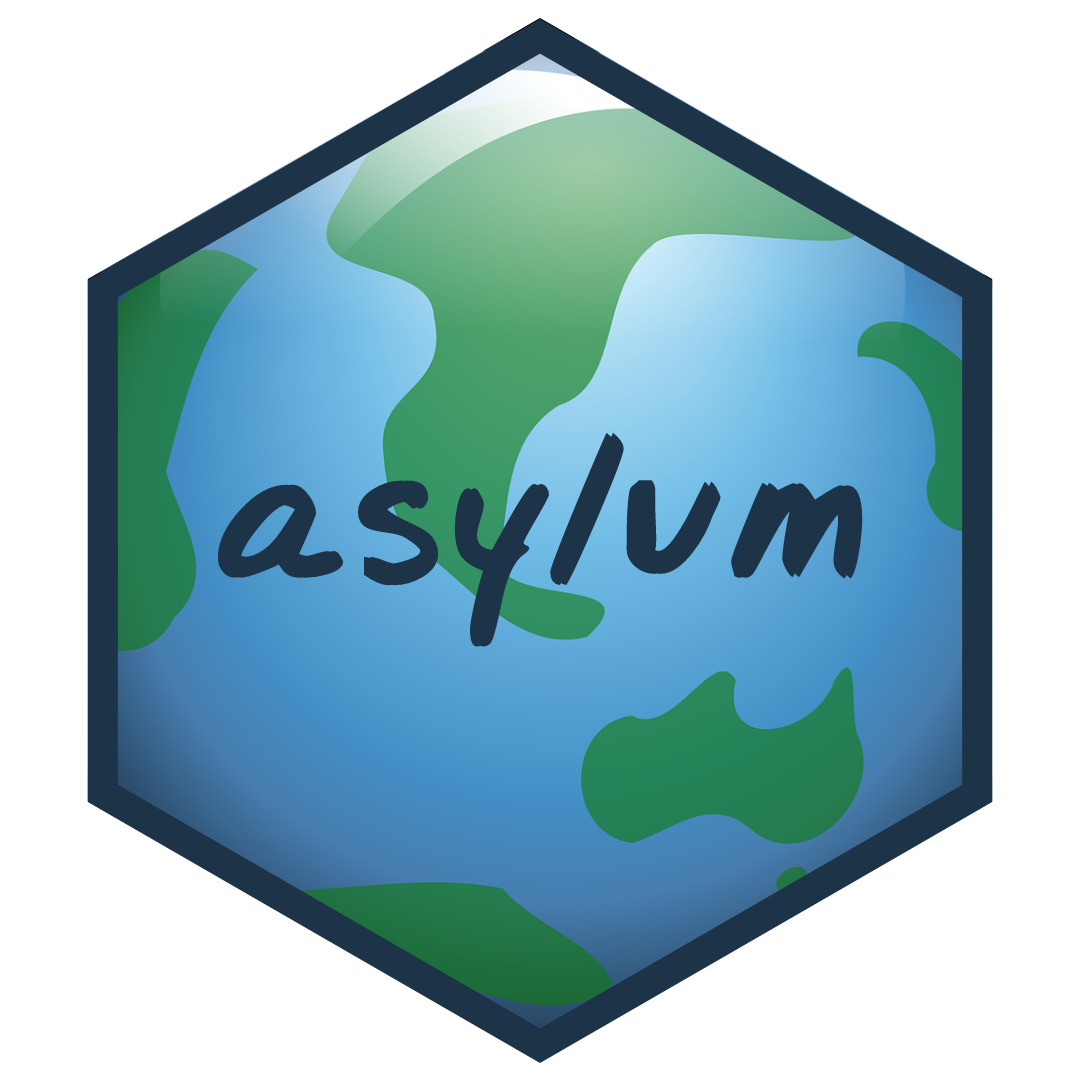
<style>
.page{position:relative;width:1080px;height:1080px;background:#ffffff}
.page>*{position:absolute;margin:0}
.t1{font:246px "Jrhand";color:#1d3348;font-weight:bold}
</style>
<div class="page">
<p class="t1" style="left:217px;top:432px;width:646px;height:215px">asylum</p>
</div>
